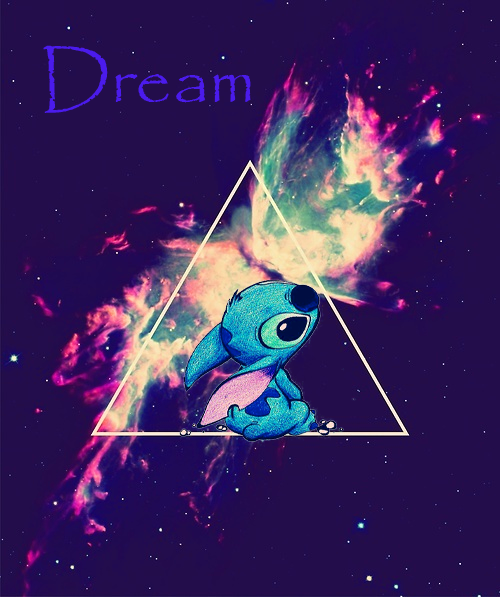
<style>
.page{position:relative;width:500px;height:597px;background:#230d4b}
.page>*{position:absolute;margin:0}
.t1{font:72px "Papyrus-Regular";color:#4b1bec}
</style>
<div class="page">
<p class="t1" style="left:43px;top:45px;width:208px;height:68px">Dream</p>
</div>
